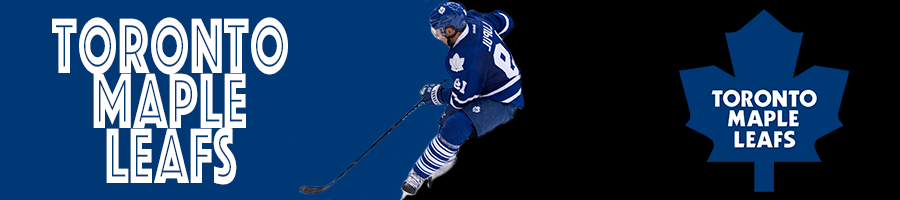
<style>
.page{position:relative;width:900px;height:200px;background:#003876}
.page>*{position:absolute;margin:0}
.t1{font:81.3px "Phosphate-Inline";letter-spacing:0.02em;color:#ffffff;scale:0.65 1}
</style>
<div class="page">
<p class="t1" style="left:52px;top:17px;width:236px;height:58px">Toronto</p>
<p class="t1" style="left:93px;top:73px;width:153px;height:55px">Maple</p>
<p class="t1" style="left:106px;top:127px;width:131px;height:58px">Leafs</p>
</div>
